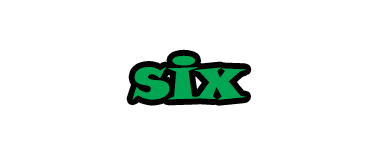
<style>
.page{position:relative;width:380px;height:161px;background:#ffffff}
.page>*{position:absolute;margin:0}
.t1{font:60px "SnapITC-Regular";color:#00a651}
</style>
<div class="page">
<p class="t1" style="left:132px;top:55px;width:114px;height:45px">six</p>
</div>
